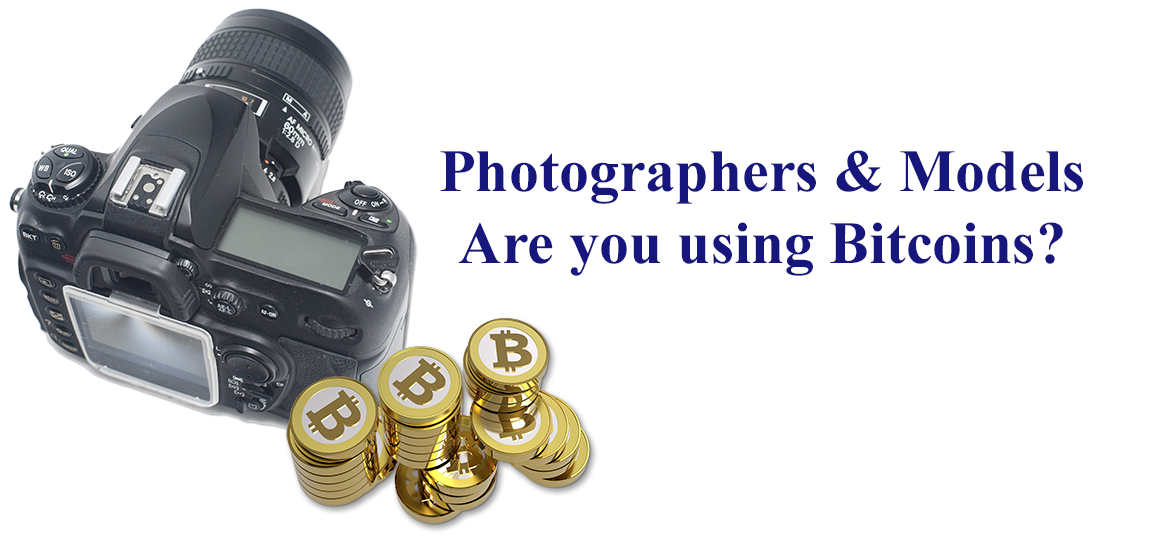
<style>
.page{position:relative;width:1152px;height:552px;background:#ffffff}
.page>*{position:absolute;margin:0}
.t1{font:60px "TimesNewRomanPS-BoldMT";color:#16167c}
</style>
<div class="page">
<p class="t1" style="left:440px;top:150px;width:643px;height:126px;text-align:center">Photographers &amp; Models<br>Are you using Bitcoins?</p>
</div>
